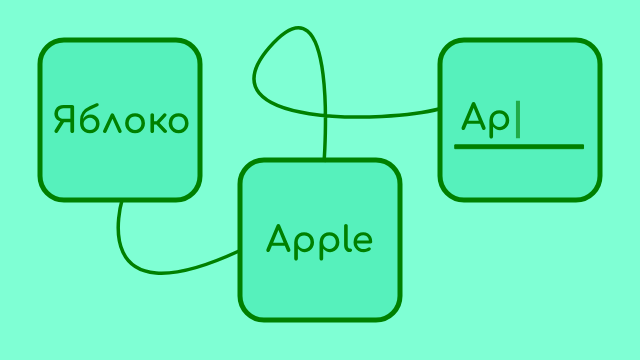
<style>
.page{position:relative;width:640px;height:360px;background:#7fffd4}
.page>*{position:absolute;margin:0}
.t1{font:36px "Comfortaa-Bold";color:#008000}
</style>
<div class="page">
<p class="t1" style="left:461px;top:101px;width:49px;height:38px">Ap</p>
<p class="t1" style="left:54px;top:103px;width:135px;height:31px">Яблоко</p>
<p class="t1" style="left:266px;top:223px;width:107px;height:38px">Apple</p>
</div>
